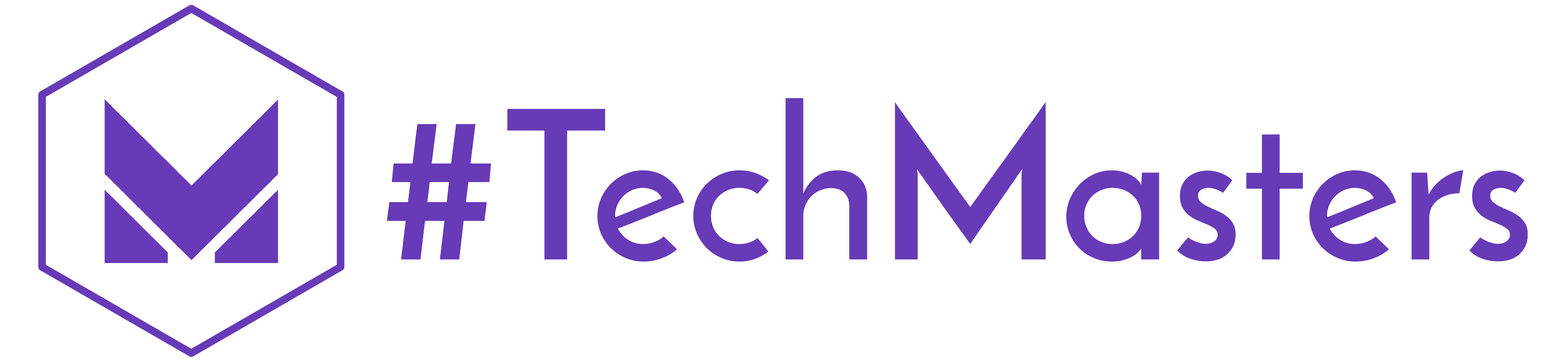
<style>
.page{position:relative;width:1568px;height:362px;background:#ffffff}
.page>*{position:absolute;margin:0}
.t1{font:207.3px "JosefinSans-SemiBold";color:#673ab7}
</style>
<div class="page">
<p class="t1" style="left:387px;top:98px;width:1141px;height:163px">#TechMasters</p>
</div>
